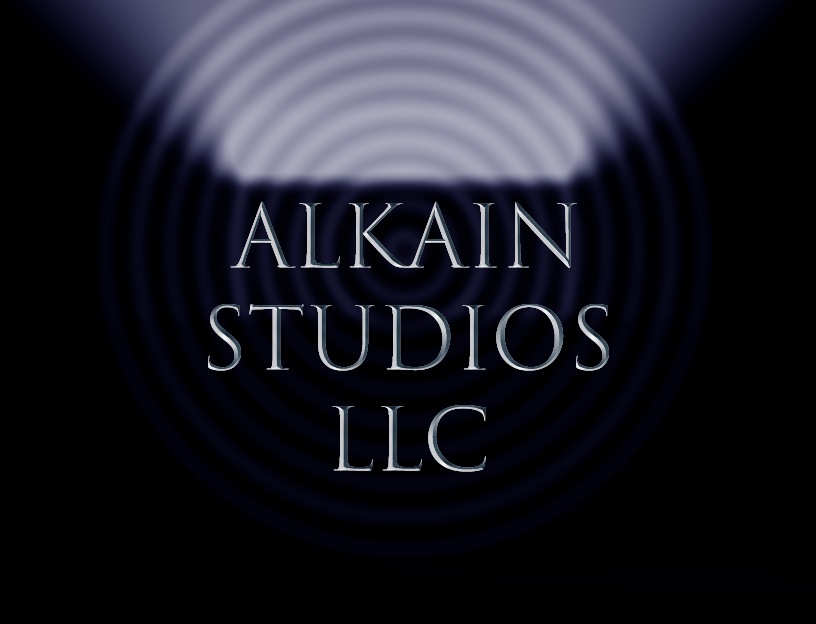
<style>
.page{position:relative;width:816px;height:624px;background:#000000}
.page>*{position:absolute;margin:0}
.t1{font:84.7px "TrajanColor-Concept"}
</style>
<div class="page">
<p class="t1" style="left:208px;top:201px;width:401px;height:271px;text-align:center">ALKAIN<br>STUDIOS<br>LLC</p>
</div>
